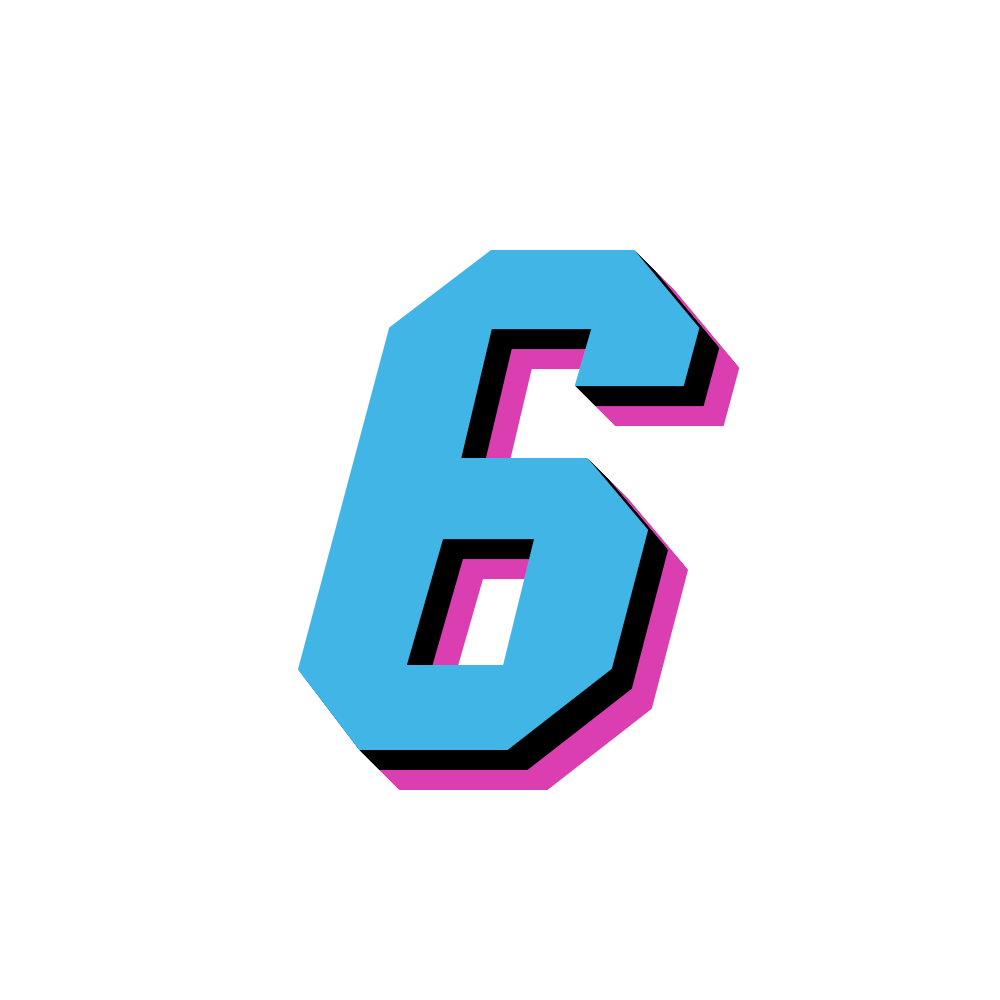
<style>
.page{position:relative;width:1000px;height:1000px;background:#ffffff}
.page>*{position:absolute;margin:0}
.t1{font:625px "NBAHeat";color:#41b6e6}
</style>
<div class="page">
<p class="t1" style="left:298px;top:250px;width:402px;height:500px">6</p>
</div>
